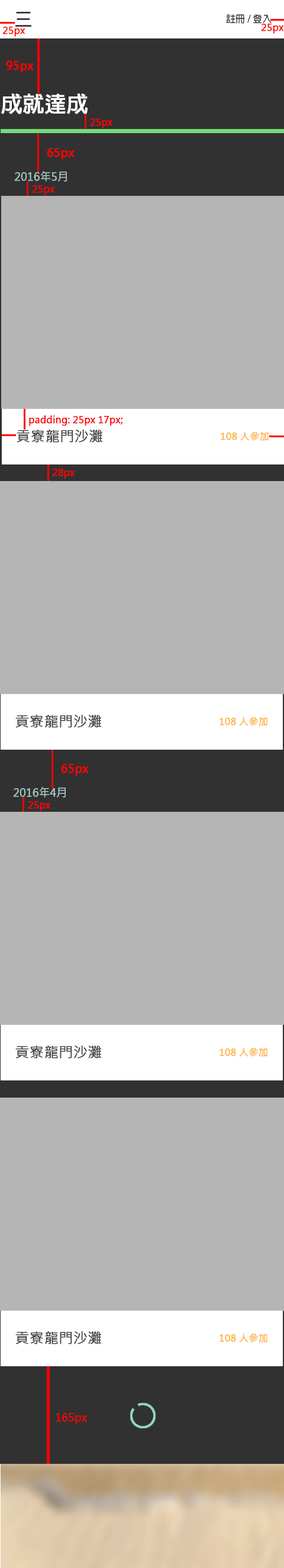
<style>
.page{position:relative;width:284px;height:1568px;background:#b5b5b5}
.page>*{position:absolute;margin:0}
.t1{font:17.8px "AdobeFanHeitiStd-Bold";color:#2e2c2c}
.t2{font:9.5px "AdobeFanHeitiStd-Bold";color:#333333}
.t3{font:9.5px "MicrosoftJhengHeiRegular";color:#ff0000;font-weight:bold}
.t4{font:11.8px "AdobeFanHeitiStd-Bold";color:#ff0000;font-weight:bold}
.t5{font:21.3px "AdobeFanHeitiStd-Bold";color:#ffffff;font-weight:bold}
.t6{font:10.7px "MicrosoftJhengHeiRegular";color:#a6c7c0;font-weight:bold}
.t7{font:14.2px "MicrosoftJhengHeiRegular";color:#424242;font-weight:bold}
.t8{font:9.5px "MicrosoftJhengHeiRegular";color:#feb143;font-weight:bold}
.t9{font:10.7px "MicrosoftJhengHeiRegular";color:#ff0000;font-weight:bold}
</style>
<div class="page">
<p class="t1" style="left:15px;top:12px;width:16px;height:15px">三</p>
<p class="t2" style="left:226px;top:14px;width:46px;height:10px">註冊 / 登入</p>
<p class="t3" style="left:2px;top:27px;width:23px;height:10px">25px</p>
<p class="t3" style="left:261px;top:24px;width:23px;height:10px">25px</p>
<p class="t4" style="left:6px;top:60px;width:28px;height:13px">95px</p>
<p class="t5" style="left:1px;top:93px;width:87px;height:21px">成就達成</p>
<p class="t3" style="left:90px;top:118px;width:23px;height:10px">25px</p>
<p class="t4" style="left:47px;top:148px;width:28px;height:12px">65px</p>
<p class="t6" style="left:14px;top:171px;width:53px;height:11px">2016年5月</p>
<p class="t3" style="left:32px;top:185px;width:23px;height:10px">25px</p>
<p class="t3" style="left:29px;top:415px;width:94px;height:11px">padding: 25px 17px;</p>
<p class="t7" style="left:17px;top:430px;width:86px;height:13px">貢寮龍門沙灘</p>
<p class="t8" style="left:221px;top:431px;width:48px;height:10px">108 人參加</p>
<p class="t3" style="left:52px;top:469px;width:23px;height:10px">28px</p>
<p class="t7" style="left:15px;top:715px;width:87px;height:13px">貢寮龍門沙灘</p>
<p class="t8" style="left:220px;top:717px;width:47px;height:9px">108 人參加</p>
<p class="t4" style="left:61px;top:764px;width:28px;height:12px">65px</p>
<p class="t6" style="left:13px;top:787px;width:53px;height:11px">2016年4月</p>
<p class="t3" style="left:28px;top:801px;width:23px;height:10px">25px</p>
<p class="t7" style="left:15px;top:1046px;width:87px;height:13px">貢寮龍門沙灘</p>
<p class="t8" style="left:220px;top:1047px;width:47px;height:10px">108 人參加</p>
<p class="t7" style="left:15px;top:1331px;width:87px;height:13px">貢寮龍門沙灘</p>
<p class="t8" style="left:220px;top:1333px;width:47px;height:10px">108 人參加</p>
<p class="t9" style="left:56px;top:1413px;width:31px;height:11px">165px</p>
</div>
